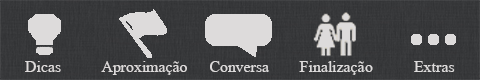
<style>
.page{position:relative;width:480px;height:80px}
.page>*{position:absolute;margin:0}
.t1{font:24px "AngsanaUPC";color:#dddada}
.t2{font:24px "AngsanaUPC";color:#dddbdb}
</style>
<div class="page">
<p class="t1" style="left:25px;top:61px;width:36px;height:11px">Dicas</p>
<p class="t1" style="left:101px;top:61px;width:86px;height:14px">Aproximação</p>
<p class="t2" style="left:210px;top:61px;width:59px;height:11px">Conversa</p>
<p class="t2" style="left:299px;top:61px;width:74px;height:14px">Finalização</p>
<p class="t2" style="left:414px;top:61px;width:41px;height:11px">Extras</p>
</div>
